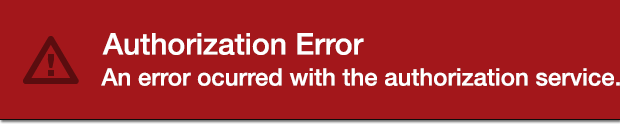
<style>
.page{position:relative;width:620px;height:125px;background:#a3171b}
.page>*{position:absolute;margin:0}
.t1{font:30px "HelveticaNeue-Medium";color:#ffffff}
.t2{font:24px "HelveticaNeue-Medium";color:#ffffff}
</style>
<div class="page">
<p class="t1" style="left:102px;top:33px;width:262px;height:22px">Authorization Error</p>
<p class="t2" style="left:101px;top:68px;width:519px;height:18px">An error ocurred with the authorization service.</p>
</div>
